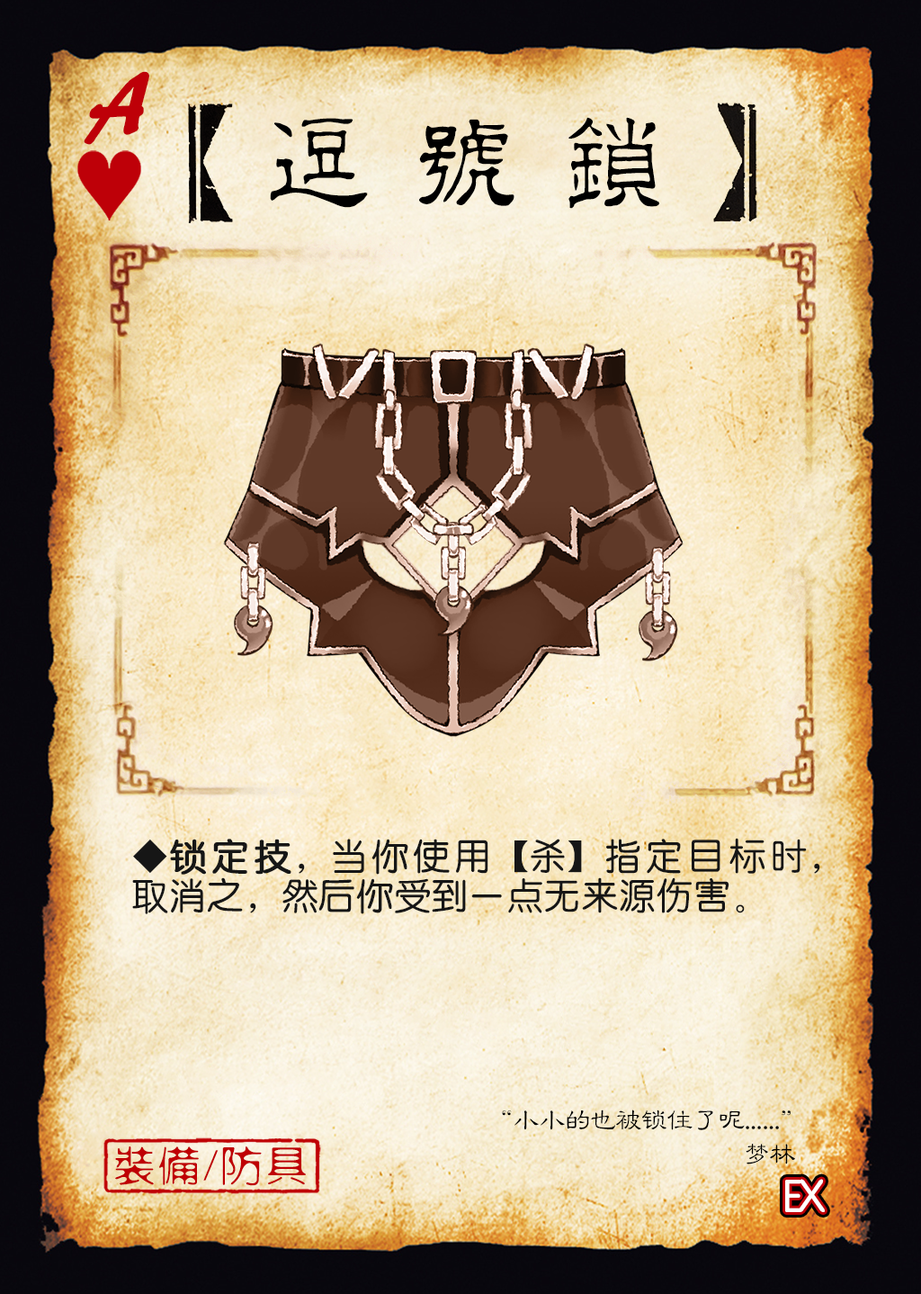
<style>
.page{position:relative;width:921px;height:1294px}
.page>*{position:absolute;margin:0}
.t1{font:110.9px "HYi1gf";color:#be0008;font-weight:bold;font-style:italic}
.t2{font:110.9px "¾­µä·±½ÇÁ¥ Regular";letter-spacing:0.33em;color:#000000}
.t3{font:37.5px/39.4px "HYe3gj";color:#161616}
.t4{font:37.5px/39.4px "HYe3gj";color:#161616;font-weight:bold}
.t5{font:27.1px "FZLBJW--GB1-0";letter-spacing:-0.05em;color:#000000}
.t6{font:41.4px "FZXSHFW--GB1-0";letter-spacing:0.08em;color:#bf0004}
.t7{font:45.4px "FZY3K--GBK1-0";letter-spacing:-0.1em;color:#ffffff}
</style>
<div class="page">
<p class="t1" style="left:84px;top:71px;width:65px;height:74px">A</p>
<p class="t2" style="left:270px;top:117px;width:390px;height:92px">逗号锁</p>
<p class="t3" style="left:132px;top:838px;width:689px;height:76px;text-align:justify">◆<span class="t4">锁定技</span>，当你使用【杀】指定目标时，取消之，然后你受到一点无来源伤害。</p>
<p class="t5" style="left:502px;top:1110px;width:289px;height:20px">“小小的也被锁住了呢......”</p>
<p class="t6" style="left:115px;top:1146px;width:191px;height:40px">装备/防具</p>
<p class="t5" style="left:746px;top:1144px;width:49px;height:20px">梦林</p>
<p class="t7" style="left:786px;top:1179px;width:39px;height:33px">EX</p>
</div>
